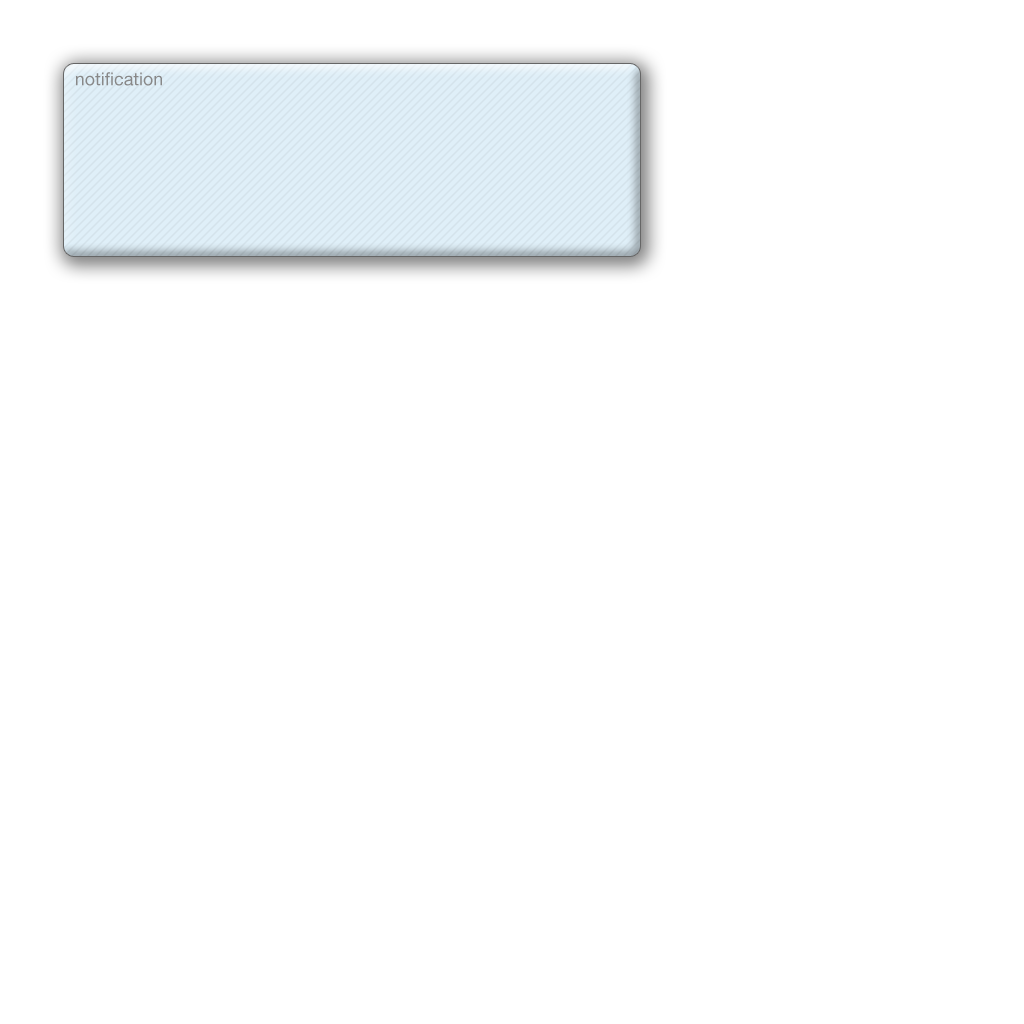
<style>
.page{position:relative;width:1024px;height:1024px;background:#ffffff}
.page>*{position:absolute;margin:0}
.t1{font:18px "HelveticaNeue";color:#888888}
</style>
<div class="page">
<p class="t1" style="left:76px;top:72px;width:86px;height:14px">notification</p>
</div>
